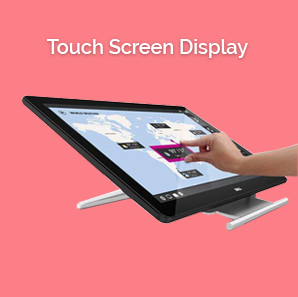
<style>
.page{position:relative;width:298px;height:297px;background:#fc7e87}
.page>*{position:absolute;margin:0}
.t1{font:19.8px "Raleway-SemiBold";color:#ffffff}
</style>
<div class="page">
<p class="t1" style="left:46px;top:39px;width:202px;height:19px">Touch Screen Display</p>
</div>
